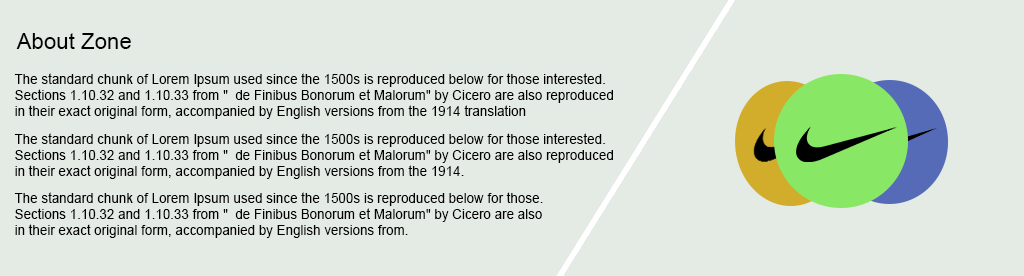
<style>
.page{position:relative;width:1024px;height:276px;background:#e4eae4}
.page>*{position:absolute;margin:0}
.t1{font:22.3px "ArialMT";color:#000000}
.t2{font:13.5px "ArialMT";color:#000000}
</style>
<div class="page">
<p class="t1" style="left:16px;top:33px;width:115px;height:16px">About Zone</p>
<p class="t2" style="left:14px;top:73px;width:599px;height:46px">The standard chunk of Lorem Ipsum used since the 1500s is reproduced below for those interested.<br>Sections 1.10.32 and 1.10.33 from "  de Finibus Bonorum et Malorum" by Cicero are also reproduced<br>in their exact original form, accompanied by English versions from the 1914 translation</p>
<p class="t2" style="left:14px;top:133px;width:599px;height:46px">The standard chunk of Lorem Ipsum used since the 1500s is reproduced below for those interested.<br>Sections 1.10.32 and 1.10.33 from "  de Finibus Bonorum et Malorum" by Cicero are also reproduced<br>in their exact original form, accompanied by English versions from the 1914.</p>
<p class="t2" style="left:14px;top:192px;width:529px;height:46px">The standard chunk of Lorem Ipsum used since the 1500s is reproduced below for those.<br>Sections 1.10.32 and 1.10.33 from "  de Finibus Bonorum et Malorum" by Cicero are also <br>in their exact original form, accompanied by English versions from.</p>
</div>
